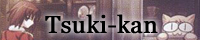
<style>
.page{position:relative;width:200px;height:40px}
.page>*{position:absolute;margin:0}
.t1{font:24px "Georgia";color:#000000;font-weight:bold}
</style>
<div class="page">
<p class="t1" style="left:45px;top:14px;width:113px;height:20px">Tsuki-kan</p>
</div>
